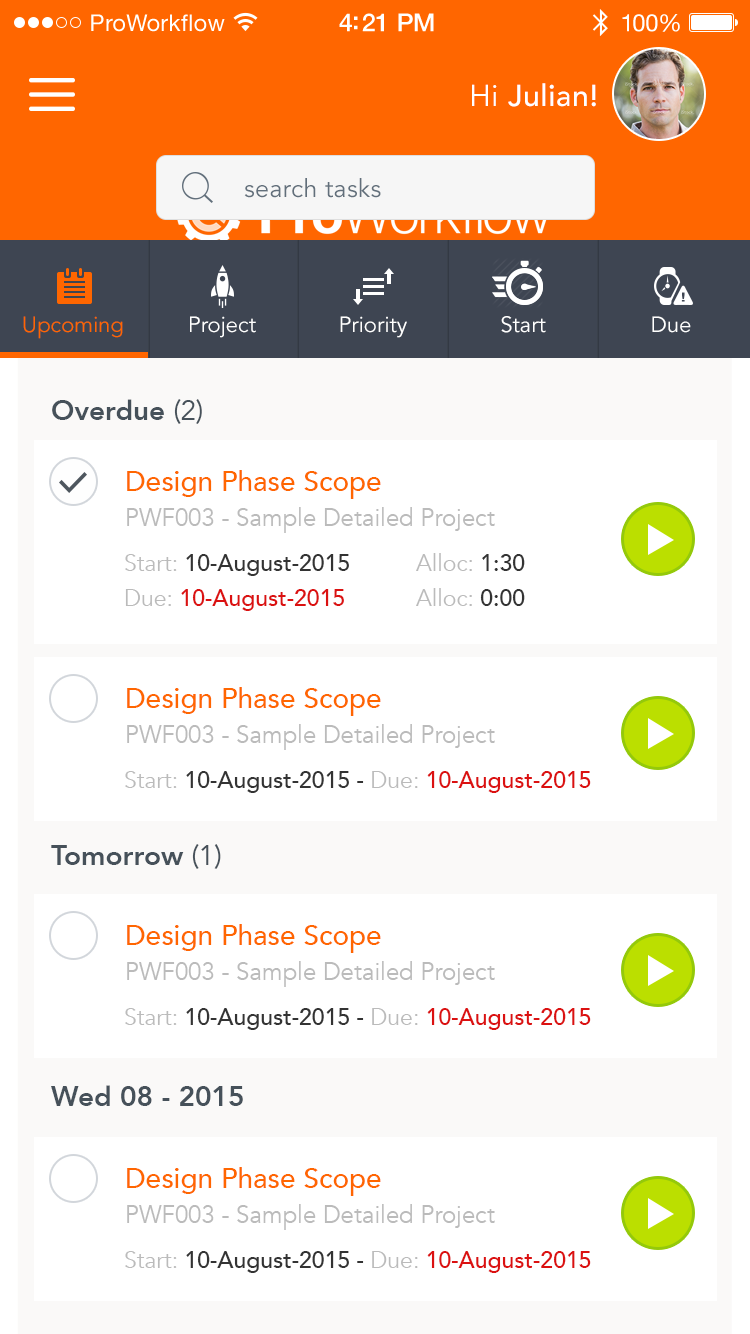
<style>
.page{position:relative;width:750px;height:1334px;background:#ffffff}
.page>*{position:absolute;margin:0}
.t1{font:23px "HelveticaNeue";letter-spacing:0.02em;color:#ffffff}
.t2{font:25px "HelveticaNeue-Medium";letter-spacing:-0.02em;color:#ffffff}
.t3{font:24px "HelveticaNeue";letter-spacing:-0.02em;color:#ffffff}
.t4{font:30px "Avenir-Medium";letter-spacing:0.02em;color:#ffffff}
.t5{font:30px "Avenir-Book";letter-spacing:0.02em;color:#ffffff}
.t6{font:25px "Avenir-Book";letter-spacing:0.015em;color:#626f7b}
.t7{font:22px "Avenir-Book";color:#ff6600}
.t8{font:22px "Avenir-Book";color:#ffffff}
.t9{font:28px "Avenir-Heavy";color:#46515a}
.t10{font:28px "Avenir-Book";color:#46515a}
.t11{font:24px/35px "Avenir-Book";color:#bbbbbb}
.t12{font:28px "Avenir-Medium";color:#ff6600}
.t13{font:23px/35px "Avenir-Medium";color:#333333}
.t14{font:23px/35px "Avenir-Book";color:#bbbbbb}
.t15{font:23px/35px "Avenir-Medium";color:#db1111}
.t16{font:23px "Avenir-Medium";color:#333333}
.t17{font:23px "Avenir-Book";color:#bbbbbb}
.t18{font:23px "Avenir-Medium";color:#db1111}
</style>
<div class="page">
<p class="t1" style="left:91px;top:14px;width:134px;height:18px">ProWorkflow</p>
<p class="t2" style="left:339px;top:13px;width:95px;height:19px">4:21 PM</p>
<p class="t3" style="left:622px;top:14px;width:58px;height:18px">100%</p>
<p class="t4" style="left:472px;top:83px;width:124px;height:24px"><span class="t5">Hi </span>Julian!</p>
<p class="t6" style="left:244px;top:178px;width:137px;height:20px">search tasks</p>
<p class="t7" style="left:23px;top:316px;width:100px;height:23px">Upcoming</p>
<p class="t8" style="left:190px;top:316px;width:66px;height:22px">Project</p>
<p class="t8" style="left:340px;top:316px;width:67px;height:22px">Priority</p>
<p class="t8" style="left:501px;top:316px;width:45px;height:17px">Start</p>
<p class="t8" style="left:652px;top:316px;width:39px;height:17px">Due</p>
<p class="t9" style="left:52px;top:399px;width:150px;height:25px">Overdue <span class="t10">(2)</span></p>
<p class="t11" style="left:127px;top:470px;width:368px;height:63px"><span class="t12">Design Phase Scope<br></span>PWF003 - Sample Detailed Project</p>
<p class="t13" style="left:125px;top:554px;width:224px;height:57px"><span class="t14">Start: </span>10-August-2015<br><span class="t14">Due: </span><span class="t15">10-August-2015</span></p>
<p class="t14" style="left:416px;top:553px;width:109px;height:53px">Alloc: <span class="t13">1:30<br></span>Alloc: <span class="t13">0:00</span></p>
<p class="t11" style="left:127px;top:687px;width:368px;height:63px"><span class="t12">Design Phase Scope<br></span>PWF003 - Sample Detailed Project</p>
<p class="t16" style="left:125px;top:771px;width:466px;height:22px"><span class="t17">Start: </span>10-August-2015 - <span class="t17">Due: </span><span class="t18">10-August-2015</span></p>
<p class="t9" style="left:51px;top:844px;width:170px;height:25px">Tomorrow <span class="t10">(1)</span></p>
<p class="t11" style="left:127px;top:924px;width:368px;height:63px"><span class="t12">Design Phase Scope<br></span>PWF003 - Sample Detailed Project</p>
<p class="t16" style="left:125px;top:1008px;width:466px;height:22px"><span class="t17">Start: </span>10-August-2015 - <span class="t17">Due: </span><span class="t18">10-August-2015</span></p>
<p class="t9" style="left:51px;top:1085px;width:192px;height:21px">Wed 08 - 2015</p>
<p class="t11" style="left:127px;top:1167px;width:368px;height:63px"><span class="t12">Design Phase Scope<br></span>PWF003 - Sample Detailed Project</p>
<p class="t16" style="left:125px;top:1251px;width:466px;height:22px"><span class="t17">Start: </span>10-August-2015 - <span class="t17">Due: </span><span class="t18">10-August-2015</span></p>
</div>
